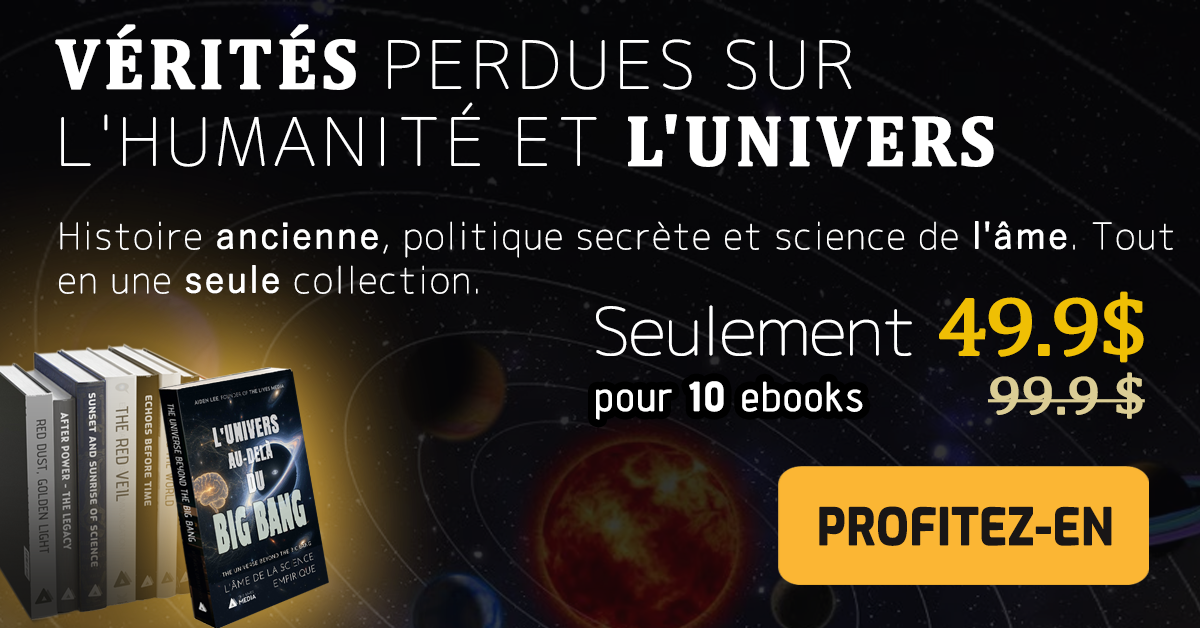
<style>
.page{position:relative;width:1200px;height:628px}
.page>*{position:absolute;margin:0}
.t1{font:65px/77px "Chogokuboso-Gothic";letter-spacing:0.05em;color:#ffffff;font-weight:bold;scale:1.05 1}
.t2{font:71.5px/77px "Cambria-Bold";letter-spacing:0.05em;color:#ffffff;font-weight:bold;scale:0.95 1}
.t3{font:36px/44px "Chogokuboso-Gothic";letter-spacing:0.025em;color:#ffffff;font-weight:bold}
.t4{font:36px/44px "YuGothic-Regular";letter-spacing:0.025em;color:#ffffff;font-weight:bold}
.t5{font:64.8px "Chogokuboso-Gothic";letter-spacing:-0.05em;color:#ffffff;font-weight:bold;scale:1.11 1}
.t6{font:82.8px "Cambria";letter-spacing:-0.05em;color:#efbf04;font-weight:bold;scale:1.11 1}
.t7{font:54px "Cambria";letter-spacing:-0.025em;color:#dbcd95;font-weight:bold;scale:1.11 1}
.t8{font:40px "AdventPro-Regular";letter-spacing:0.05em;color:#ffffff;font-weight:bold}
.t9{font:40px "AdventPro-Bold";letter-spacing:0.05em;color:#ffffff;font-weight:bold}
.t10{font:50.3px "Exo-Bold";letter-spacing:0.005em;color:#191616;font-weight:bold;scale:0.9 1}
</style>
<div class="page">
<p class="t1" style="left:55px;top:24px;width:939px;height:143px"><span class="t2">VÉRITÉS </span>PERDUES SUR L'HUMANITÉ ET <span class="t2">L'UNIVERS</span></p>
<p class="t3" style="left:59px;top:221px;width:1114px;height:73px">Histoire <span class="t4">ancienne</span>, politique secrète et science de <span class="t4">l'âme</span>. Tout en une <span class="t4">seule</span> collection.</p>
<p class="t5" style="left:596px;top:291px;width:548px;height:72px">Seulement <span class="t6">49.9$</span></p>
<p class="t7" style="left:988px;top:372px;width:157px;height:47px">99.9 $</p>
<p class="t8" style="left:596px;top:381px;width:267px;height:39px">pour <span class="t9">10</span> ebooks</p>
<p class="t10" style="left:819px;top:506px;width:293px;height:40px">PROFITEZ-EN</p>
</div>
